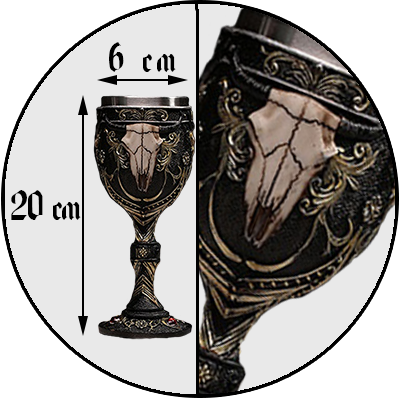
<style>
.page{position:relative;width:399px;height:399px;background:#e9e9e9}
.page>*{position:absolute;margin:0}
.t1{font:40px "BeckettRus";letter-spacing:0.09em;color:#000000}
.t2{font:40px "BeckettRus";letter-spacing:-0.02em;color:#000000}
</style>
<div class="page">
<p class="t1" style="left:109px;top:42px;width:67px;height:30px">6 см</p>
<p class="t2" style="left:11px;top:190px;width:70px;height:30px">20 см</p>
</div>
